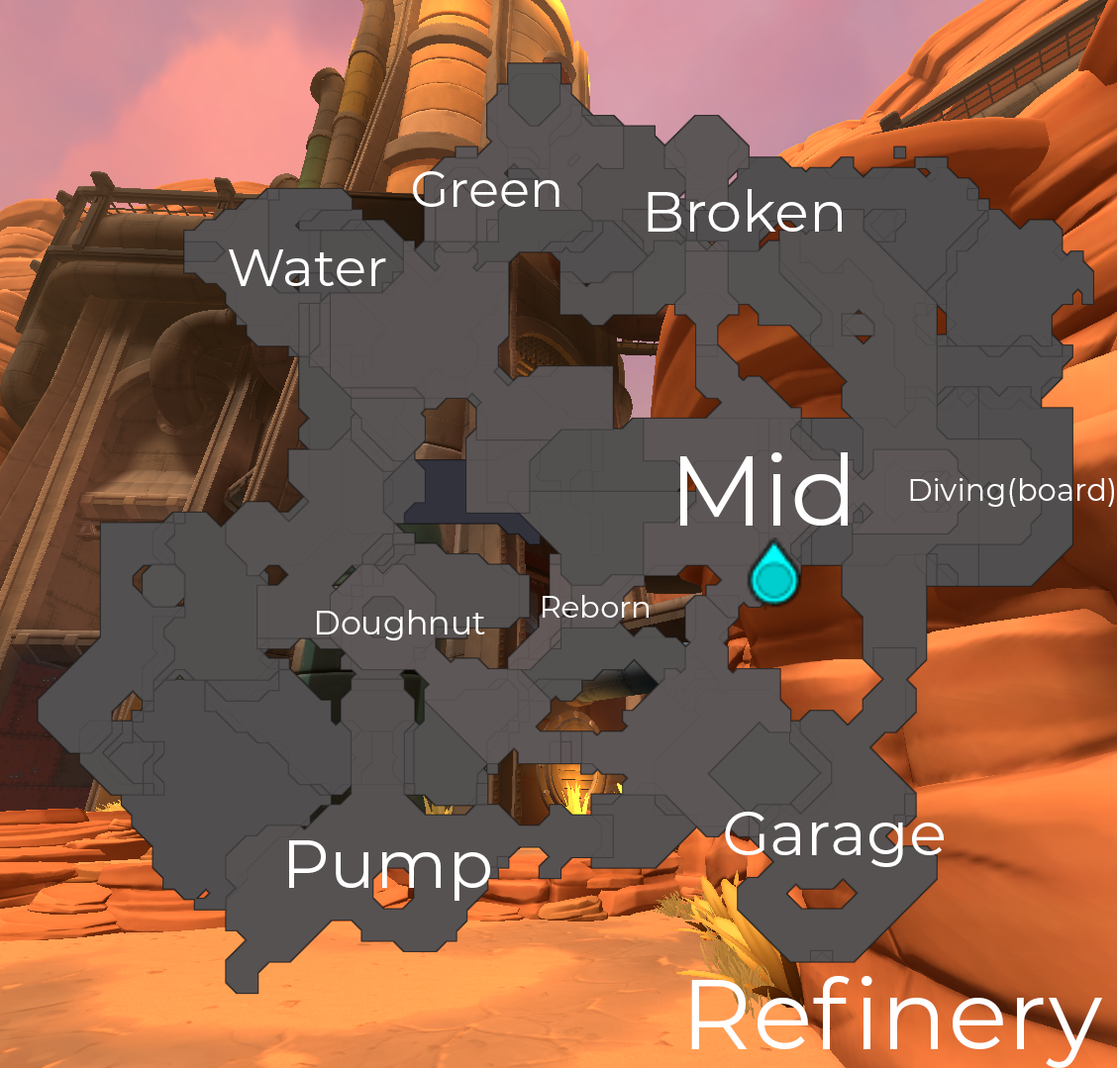
<style>
.page{position:relative;width:1117px;height:1068px}
.page>*{position:absolute;margin:0}
.t1{font:50.5px "Montserrat-Regular";color:#ffffff}
.t2{font:56.7px "Montserrat-Regular";color:#ffffff}
.t3{font:52.7px "Montserrat-Regular";color:#ffffff}
.t4{font:99px "Montserrat-Regular";color:#ffffff}
.t5{font:30.5px "Montserrat-Regular";color:#ffffff}
.t6{font:30.2px "Montserrat-Regular";color:#ffffff}
.t7{font:32.9px "Montserrat-Regular";color:#ffffff}
.t8{font:61.8px "Montserrat-Regular";color:#ffffff}
.t9{font:67.8px "Montserrat-Regular";color:#ffffff}
</style>
<div class="page">
<p class="t1" style="left:413px;top:171px;width:146px;height:36px">Green</p>
<p class="t2" style="left:647px;top:189px;width:194px;height:43px">Broken</p>
<p class="t3" style="left:229px;top:249px;width:157px;height:37px">Water</p>
<p class="t4" style="left:680px;top:452px;width:167px;height:74px">Mid</p>
<p class="t5" style="left:910px;top:478px;width:204px;height:29px">Diving(board)</p>
<p class="t6" style="left:542px;top:595px;width:106px;height:23px">Reborn</p>
<p class="t7" style="left:317px;top:610px;width:168px;height:30px">Doughnut</p>
<p class="t8" style="left:725px;top:812px;width:218px;height:55px">Garage</p>
<p class="t9" style="left:289px;top:840px;width:201px;height:61px">Pump</p>
<p class="t4" style="left:691px;top:976px;width:411px;height:92px">Refinery</p>
</div>
